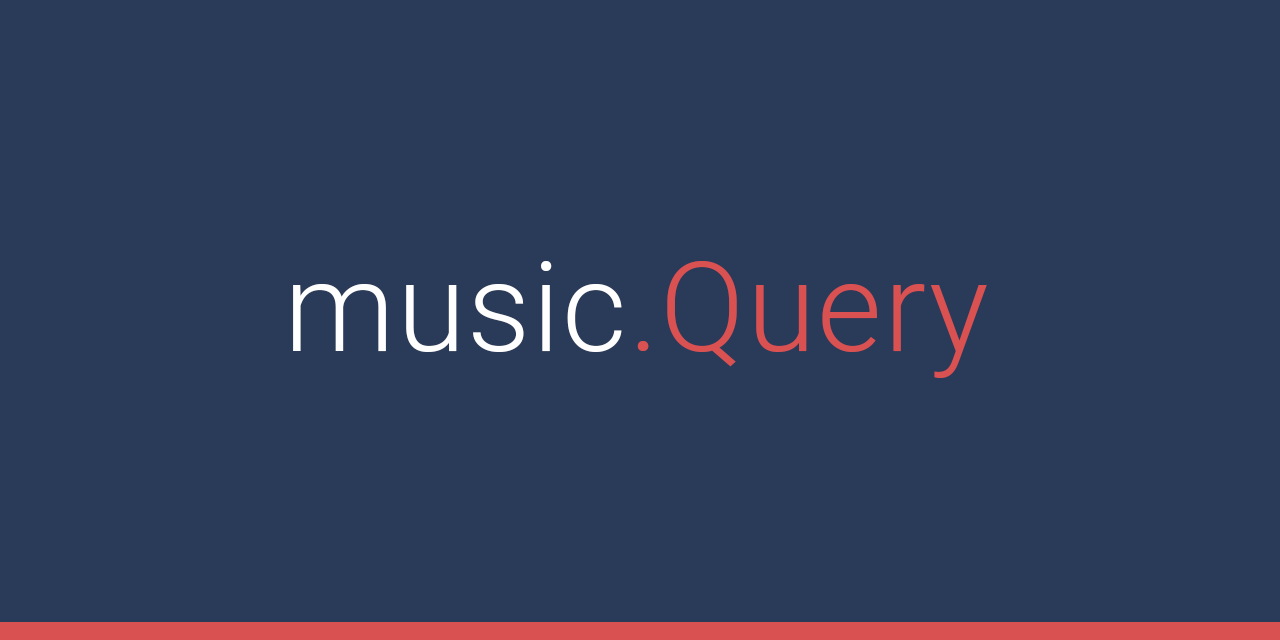
<style>
.page{position:relative;width:1280px;height:640px;background:#2a3a59}
.page>*{position:absolute;margin:0}
.t1{font:125px "Roboto-Light";letter-spacing:0.015em;color:#d95251}
.t2{font:125px "Roboto-Light";letter-spacing:0.015em;color:#ffffff}
</style>
<div class="page">
<p class="t1" style="left:293px;top:261px;width:694px;height:117px"><span class="t2">music</span>.Query</p>
</div>
